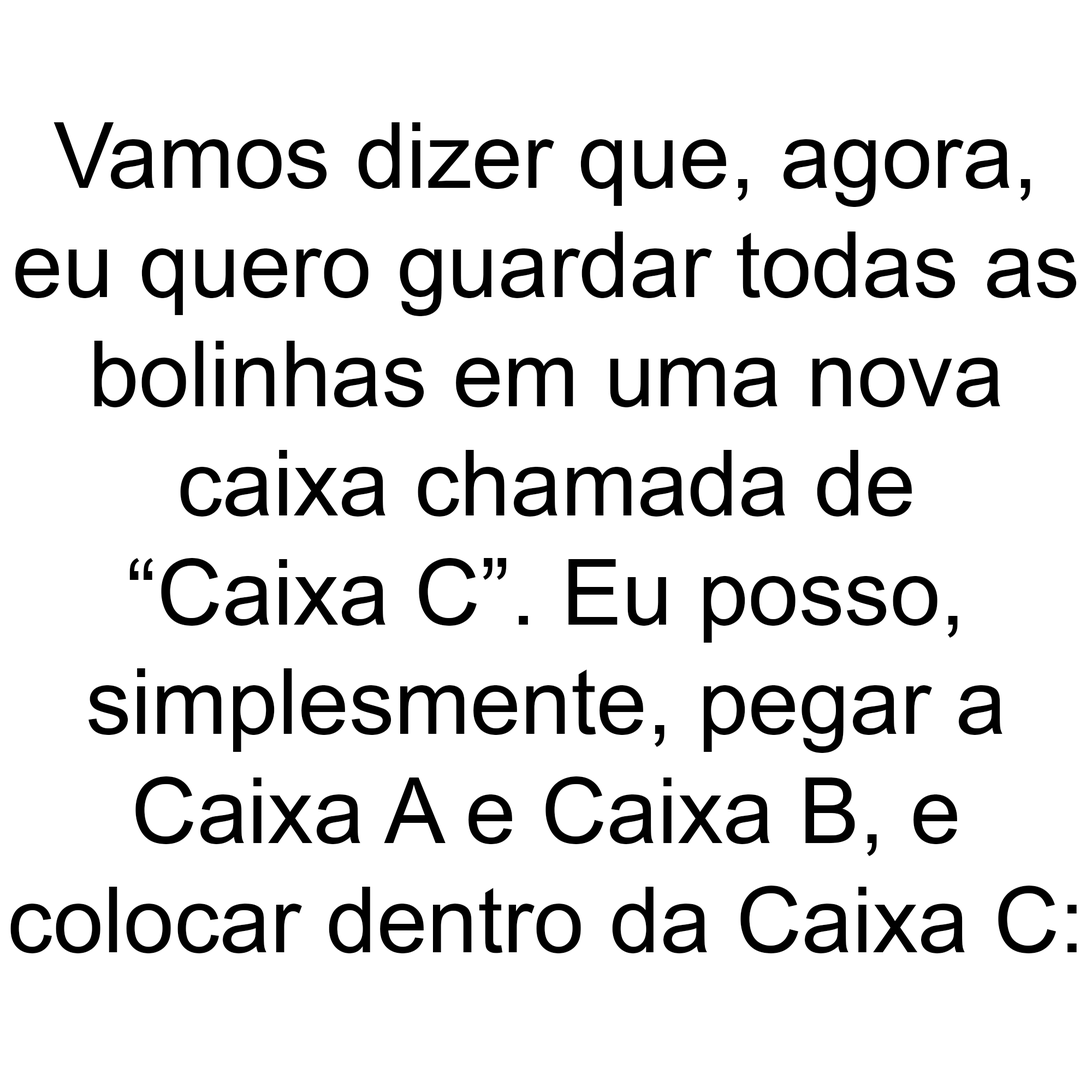
<style>
.page{position:relative;width:1092px;height:1092px;background:#ffffff}
.page>*{position:absolute;margin:0}
.t1{font:91px "ArialMT";color:#000000}
</style>
<div class="page">
<p class="t1" style="left:10px;top:122px;width:1067px;height:831px;text-align:center">Vamos dizer que, agora,<br>eu quero guardar todas as<br>bolinhas em uma nova<br>caixa chamada de<br>“Caixa C”. Eu posso,<br>simplesmente, pegar a<br>Caixa A e Caixa B, e<br>colocar dentro da Caixa C:</p>
</div>
